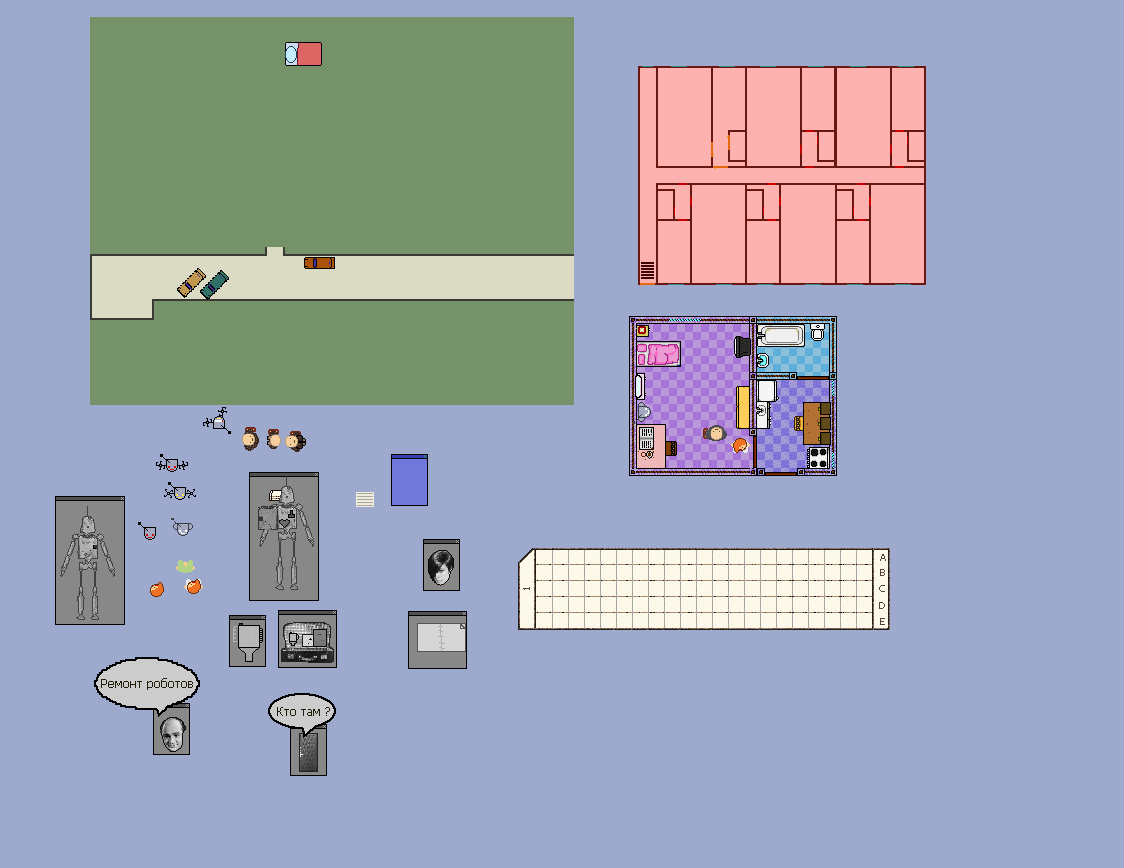
<style>
.page{position:relative;width:1124px;height:868px;background:#9da9cd}
.page>*{position:absolute;margin:0}
.t1{font:10px "Tahoma";color:#564238}
.t2{font:10px "Tahoma";color:#554137}
.t3{font:10.1px "Tahoma";color:#564238}
.t4{font:12px "Tahoma";color:#211e0a}
.t5{font:12px "Tahoma";color:#1e1b09}
</style>
<div class="page">
<p class="t1" style="left:880px;top:554px;width:6px;height:7px">A</p>
<p class="t2" style="left:880px;top:569px;width:5px;height:7px">B</p>
<p class="t3" style="left:523px;top:587px;width:7px;height:3px;rotate:-90deg">1</p>
<p class="t2" style="left:879px;top:585px;width:6px;height:7px">C</p>
<p class="t2" style="left:879px;top:602px;width:6px;height:7px">D</p>
<p class="t2" style="left:880px;top:618px;width:5px;height:7px">E</p>
<p class="t4" style="left:101px;top:678px;width:92px;height:12px">Ремонт роботов</p>
<p class="t5" style="left:277px;top:707px;width:53px;height:9px">Кто там ?</p>
</div>
